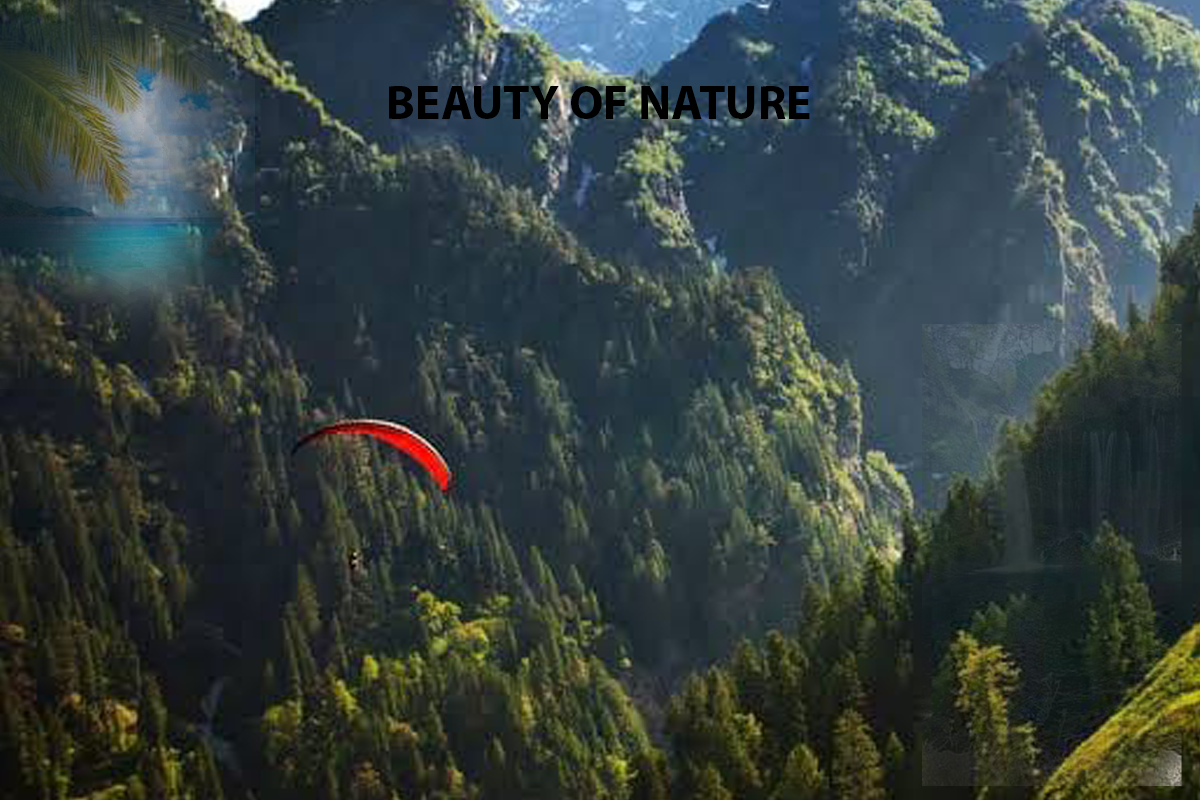
<style>
.page{position:relative;width:1200px;height:800px}
.page>*{position:absolute;margin:0}
.t1{font:48px "MyriadPro-Bold";color:#000000}
</style>
<div class="page">
<p class="t1" style="left:389px;top:86px;width:421px;height:33px">BEAUTY OF NATURE</p>
</div>
